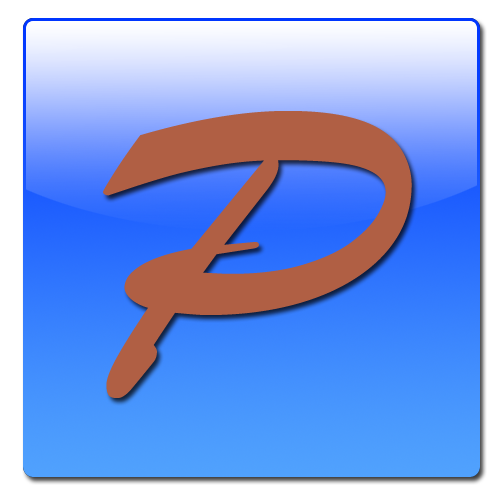
<style>
.page{position:relative;width:500px;height:500px}
.page>*{position:absolute;margin:0}
.t1{font:398.9px "BrushScriptMT";color:#b05f44;scale:1.22 1}
</style>
<div class="page">
<p class="t1" style="left:103px;top:111px;width:309px;height:287px">P</p>
</div>
